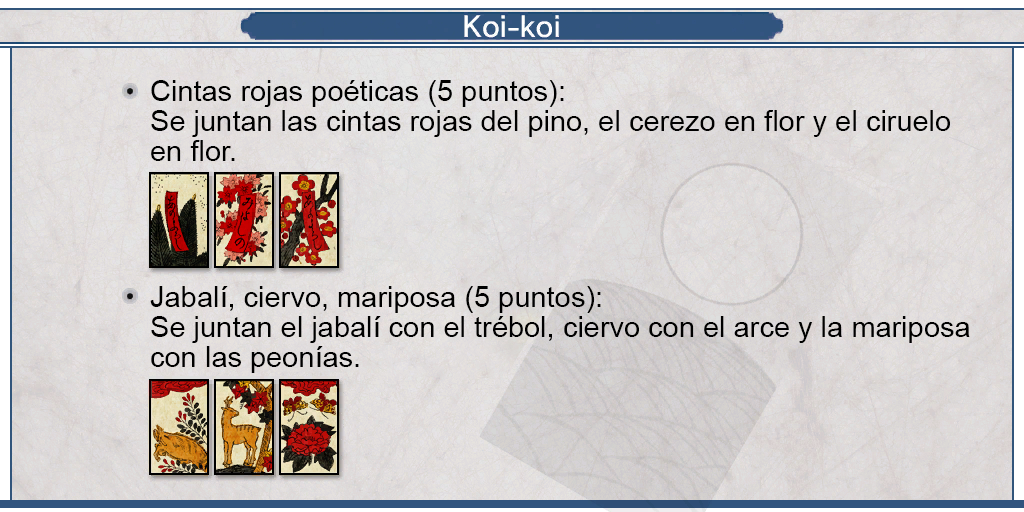
<style>
.page{position:relative;width:1024px;height:512px}
.page>*{position:absolute;margin:0}
.t1{font:29px/30px "ArialMT";color:#000000}
</style>
<div class="page">
<p class="t1" style="left:151px;top:80px;width:799px;height:81px;text-align:justify">Cintas rojas poéticas (5 puntos):<br>Se juntan las cintas rojas del pino, el cerezo en flor y el ciruelo <br>en flor.</p>
<p class="t1" style="left:150px;top:286px;width:820px;height:87px;text-align:justify">Jabalí, ciervo, mariposa (5 puntos):<br>Se juntan el jabalí con el trébol, ciervo con el arce y la mariposa <br>con las peonías.</p>
</div>
